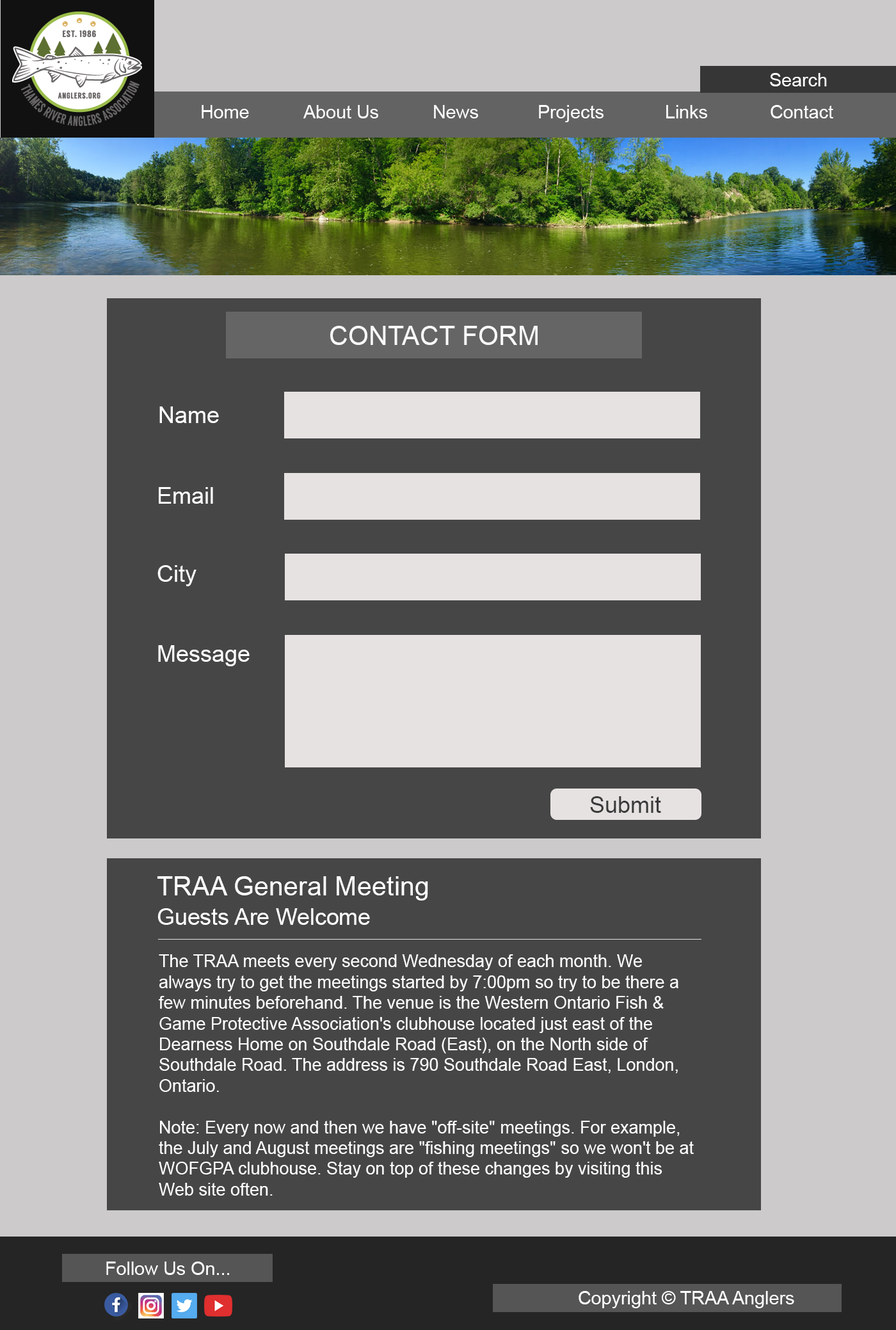
<style>
.page{position:relative;width:896px;height:1330px;background:#464646}
.page>*{position:absolute;margin:0}
.t1{font:18.4px "ArialMT";color:#ffffff}
.t2{font:26.5px "ArialMT";color:#ffffff}
.t3{font:23px "ArialMT";color:#ffffff}
.t4{font:23px "ArialMT";color:#3a3a3a}
.t5{font:22.8px "ArialMT";color:#ffffff}
.t6{font:17.3px "ArialMT";color:#ffffff}
</style>
<div class="page">
<p class="t1" style="left:770px;top:72px;width:57px;height:14px">Search</p>
<p class="t1" style="left:770px;top:73px;width:57px;height:13px">Search</p>
<p class="t1" style="left:202px;top:105px;width:47px;height:13px">Home</p>
<p class="t1" style="left:303px;top:105px;width:75px;height:13px">About Us</p>
<p class="t1" style="left:434px;top:105px;width:44px;height:13px">News</p>
<p class="t1" style="left:539px;top:105px;width:65px;height:17px">Projects</p>
<p class="t1" style="left:666px;top:105px;width:41px;height:13px">Links</p>
<p class="t1" style="left:771px;top:105px;width:63px;height:13px">Contact</p>
<p class="t2" style="left:330px;top:326px;width:208px;height:19px">CONTACT FORM</p>
<p class="t3" style="left:159px;top:407px;width:60px;height:16px">Name</p>
<p class="t3" style="left:159px;top:487px;width:54px;height:17px">Email</p>
<p class="t3" style="left:157px;top:565px;width:40px;height:21px">City</p>
<p class="t3" style="left:158px;top:645px;width:92px;height:21px">Message</p>
<p class="t4" style="left:590px;top:796px;width:71px;height:17px">Submit</p>
<p class="t2" style="left:157px;top:876px;width:271px;height:25px">TRAA General Meeting</p>
<p class="t5" style="left:157px;top:908px;width:213px;height:17px">Guests Are Welcome</p>
<p class="t6" style="left:159px;top:955px;width:535px;height:241px">The TRAA meets every second Wednesday of each month. We always try to get the meetings started by 7:00pm so try to be there a few minutes beforehand. The venue is the Western Ontario Fish &amp; Game Protective Association's clubhouse located just east of the Dearness Home on Southdale Road (East), on the North side of Southdale Road. The address is 790 Southdale Road East, London, Ontario.<br><br>Note: Every now and then we have "off-site" meetings. For example, the July and August meetings are "fishing meetings" so we won't be at WOFGPA clubhouse. Stay on top of these changes by visiting this Web site often.</p>
<p class="t1" style="left:106px;top:1261px;width:123px;height:14px">Follow Us On...</p>
<p class="t1" style="left:106px;top:1262px;width:123px;height:13px">Follow Us On...</p>
<p class="t1" style="left:579px;top:1291px;width:216px;height:18px">Copyright © TRAA Anglers</p>
</div>
